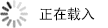
<style>
.page{position:relative;width:108px;height:28px;background:#ffffff}
.page>*{position:absolute;margin:0}
.t1{font:14px "SimHei";color:#000000}
</style>
<div class="page">
<p class="t1" style="left:39px;top:7px;width:56px;height:14px">正在载入</p>
</div>
